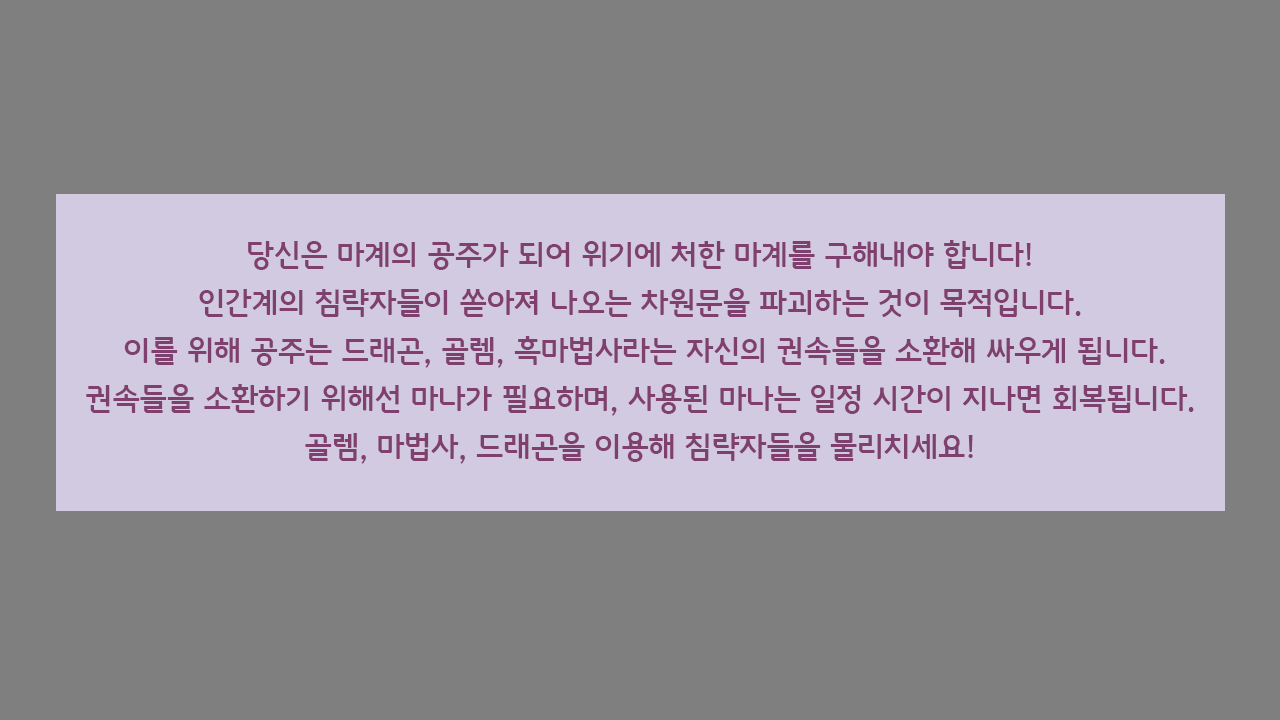
<style>
.page{position:relative;width:1280px;height:720px;background:#7f7f7f}
.page>*{position:absolute;margin:0}
.t1{font:30px/48px "GodoM";color:#80406f}
</style>
<div class="page">
<p class="t1" style="left:86px;top:240px;width:1108px;height:224px;text-align:center">당신은 마계의 공주가 되어 위기에 처한 마계를 구해내야 합니다!<br>인간계의 침략자들이 쏟아져 나오는 차원문을 파괴하는 것이 목적입니다.<br> 이를 위해 공주는 드래곤, 골렘, 흑마법사라는 자신의 권속들을 소환해 싸우게 됩니다.<br>권속들을 소환하기 위해선 마나가 필요하며, 사용된 마나는 일정 시간이 지나면 회복됩니다.<br>골렘, 마법사, 드래곤을 이용해 침략자들을 물리치세요!</p>
</div>
